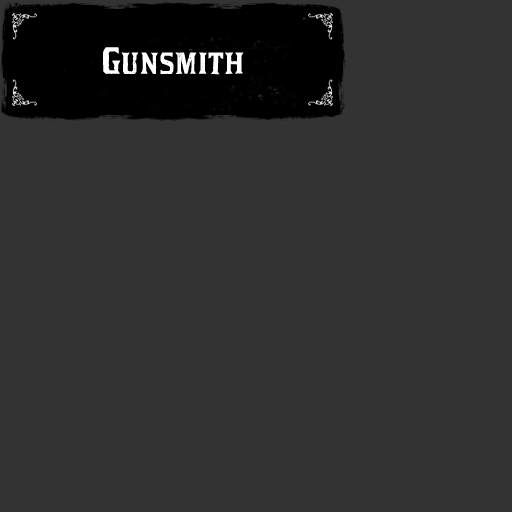
<style>
.page{position:relative;width:512px;height:512px;background:#333333}
.page>*{position:absolute;margin:0}
.t1{font:34px "RDRLino-Regular";color:#ffffff}
</style>
<div class="page">
<p class="t1" style="left:102px;top:47px;width:142px;height:28px">Gunsmith</p>
</div>
